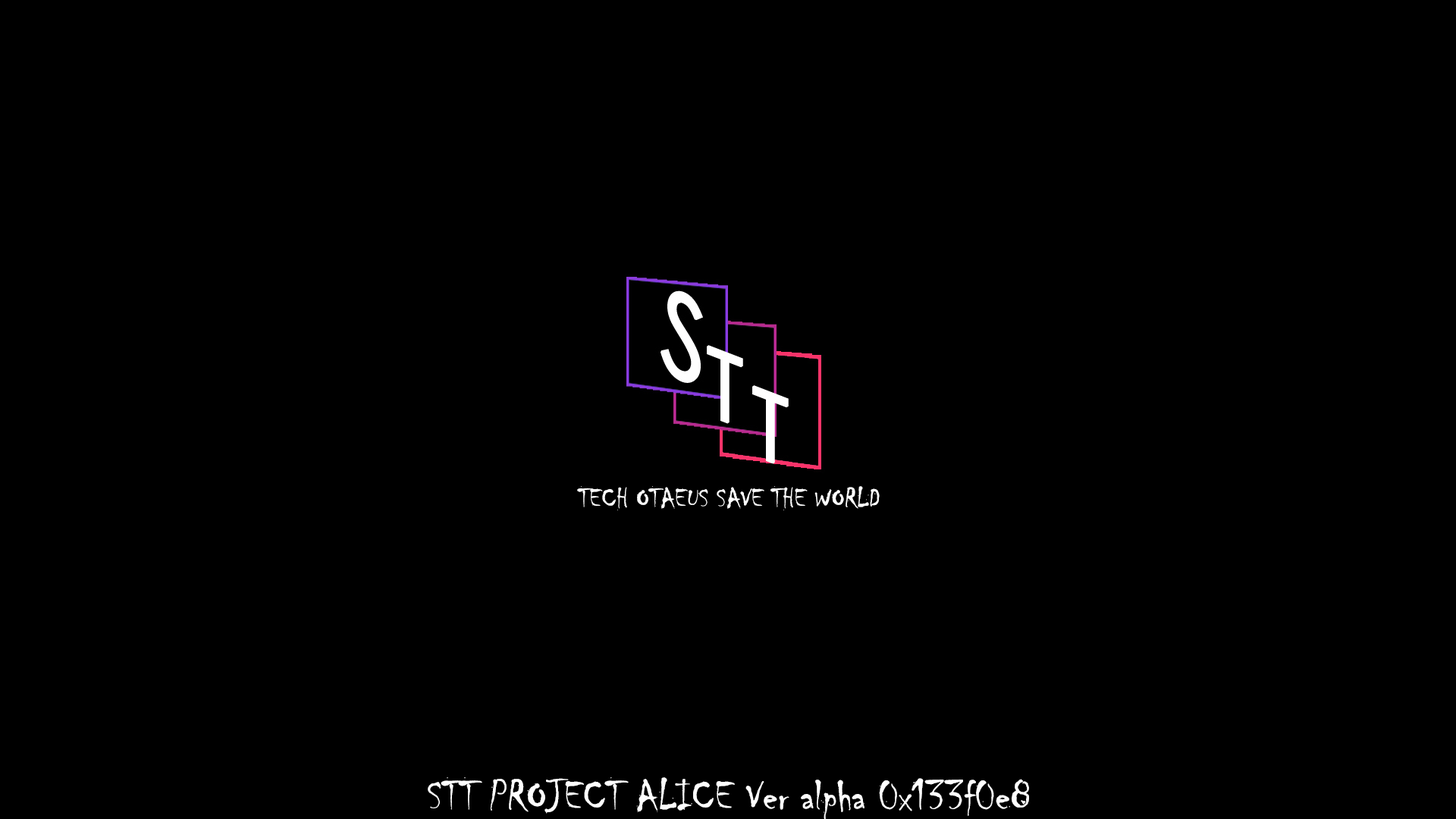
<style>
.page{position:relative;width:1456px;height:819px;background:#000000}
.page>*{position:absolute;margin:0}
.t1{font:28.4px "Chiller-Regular";color:#fefefe}
.t2{font:44.2px "Chiller-Regular";color:#fefefe}
</style>
<div class="page">
<p class="t1" style="left:577px;top:486px;width:303px;height:24px">TECH OTAEUS SAVE THE WORLD</p>
<p class="t2" style="left:428px;top:777px;width:601px;height:43px">STT PROJECT ALICE Ver alpha 0x133f0e8</p>
</div>
